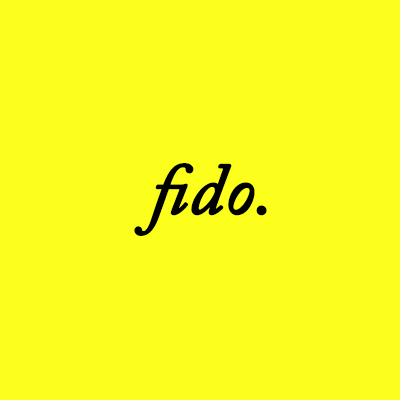
<style>
.page{position:relative;width:400px;height:400px;background:#fcff1b}
.page>*{position:absolute;margin:0}
.t1{font:72px "ACaslonPro-Italic";color:#000000;font-weight:bold}
</style>
<div class="page">
<p class="t1" style="left:134px;top:163px;width:133px;height:73px">fido.</p>
</div>
